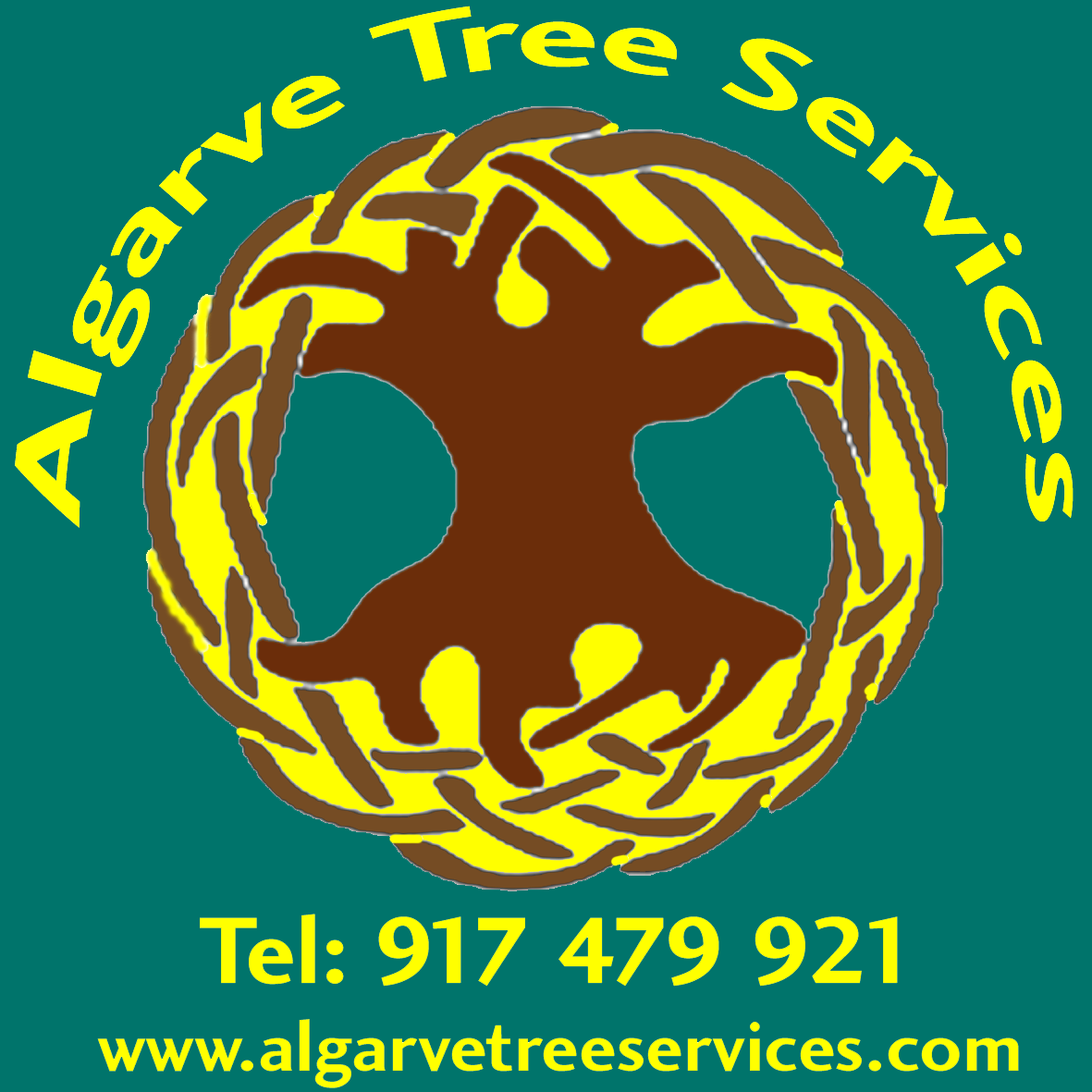
<style>
.page{position:relative;width:1092px;height:1092px;background:#00746b}
.page>*{position:absolute;margin:0}
.t1{font:97.7px "CharlotteSansBold";color:#ffff00}
.t2{font:73.3px "CharlotteSansBold";color:#ffff00}
</style>
<div class="page">
<p class="t1" style="left:15px;top:6px;width:1058px;height:522px;text-align:center">Algarve Tree Services</p>
<p class="t2" style="left:97px;top:914px;width:922px;height:174px;text-align:center"><span class="t1">Tel: 917 479 921<br></span>www.algarvetreeservices.com</p>
</div>
